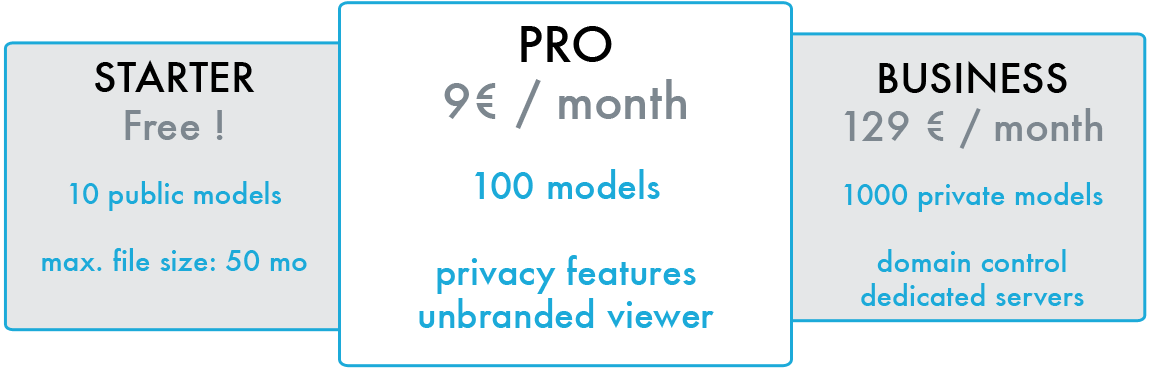
<style>
.page{position:relative;width:1152px;height:369px;background:#ffffff}
.page>*{position:absolute;margin:0}
.t1{font:36px "Futura-Medium";color:#1caad9}
.t2{font:28px "Futura-Medium";color:#000000}
.t3{font:48px "Futura-Medium";color:#000000}
.t4{font:48px "Futura-Medium";color:#7d878f}
.t5{font:28px "Futura-Medium";color:#1caad9}
.t6{font:23.5px "Futura-Medium";color:#000000}
.t7{font:40.2px "Futura-Medium";color:#000000}
.t8{font:40.2px "Futura-Medium";color:#7d878f}
</style>
<div class="page">
<p class="t1" style="left:419px;top:26px;width:295px;height:302px;text-align:center"><span class="t2"><br></span><span class="t3">PRO<br></span><span class="t4">9€ / month<br><br></span>100 models<br><br>privacy features<br>unbranded viewer</p>
<p class="t5" style="left:42px;top:60px;width:265px;height:211px;text-align:center"><span class="t6"><br></span><span class="t7">STARTER<br></span><span class="t8">Free !<br><br></span>10 public models<br><br>max. file size: 50 mo</p>
<p class="t5" style="left:844px;top:61px;width:259px;height:245px;text-align:center"><span class="t6"><br></span><span class="t7">BUSINESS<br></span><span class="t8">129 € / month<br><br></span>1000 private models<br><br>domain control<br>dedicated servers</p>
</div>
